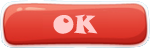
<style>
.page{position:relative;width:150px;height:48px}
.page>*{position:absolute;margin:0}
.t1{font:25.1px "SnapITC-Regular";color:#ffcccc;font-weight:bold}
</style>
<div class="page">
<p class="t1" style="left:53px;top:14px;width:45px;height:20px">OK</p>
</div>
